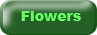
<style>
.page{position:relative;width:97px;height:35px;background:#276027}
.page>*{position:absolute;margin:0}
.t1{font:14px "Arial-Black";color:#66ff66}
</style>
<div class="page">
<p class="t1" style="left:21px;top:11px;width:60px;height:10px">Flowers</p>
</div>
